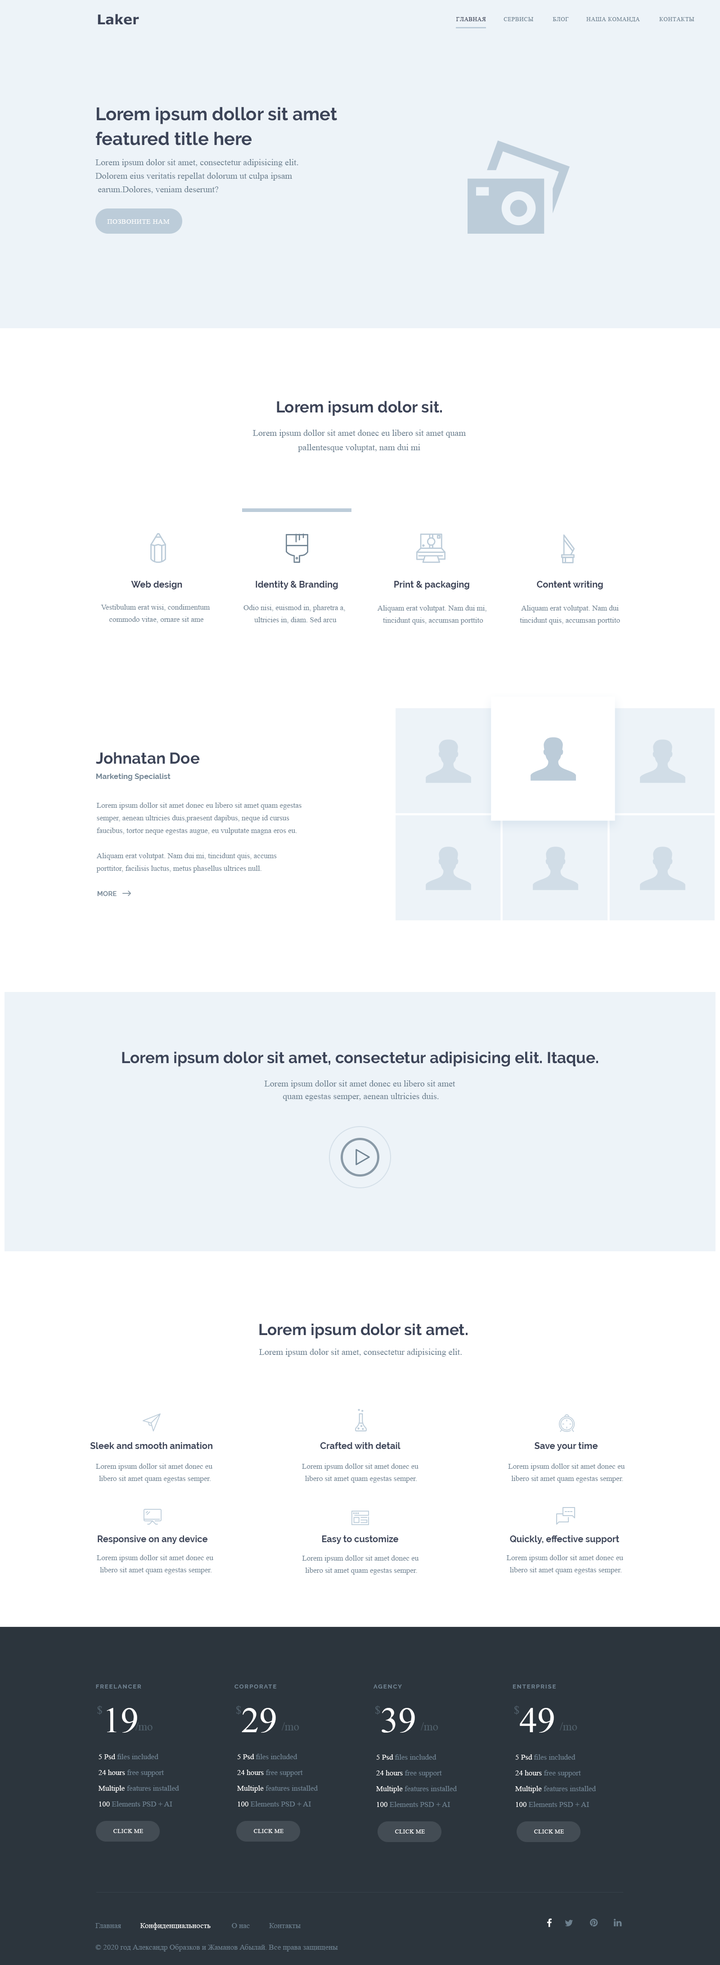
<style>
.page{position:relative;width:720px;height:1965px;background:#ffffff}
.page>*{position:absolute;margin:0}
.t1{font:13.5px "Verdana-Bold";color:#3c4357}
.t2{font:5.9px "TimesNewRomanPSMT";letter-spacing:0.05em;color:#718493;text-transform:uppercase}
.t3{font:5.9px "TimesNewRomanPSMT";letter-spacing:0.05em;color:#3c4357;text-transform:uppercase}
.t4{font:18px/24.8px "Raleway-Bold";color:#3c4458}
.t5{font:9px/13.5px "TimesNewRomanPSMT";color:#718493}
.t6{font:6.8px "TimesNewRomanPSMT";letter-spacing:0.05em;color:#ffffff;text-transform:uppercase}
.t7{font:15.8px "Raleway-Bold";color:#3c4357}
.t8{font:9px/14.4px "TimesNewRomanPSMT";color:#718493}
.t9{font:9px "Raleway-Bold";color:#3c4357}
.t10{font:7.7px/12.2px "TimesNewRomanPSMT";color:#718493}
.t11{font:48.3px "cozy";color:#bcccd9}
.t12{font:48.3px "cozy";color:#d1dde7}
.t13{font:15.8px "Raleway-Bold";color:#3c4458}
.t14{font:7.7px "Raleway-Bold";color:#718493}
.t15{font:7.7px/12.6px "TimesNewRomanPSMT";color:#718493}
.t16{font:6.8px "Raleway-Bold";color:#7d8e9c;text-transform:uppercase}
.t17{font:9px/12.6px "TimesNewRomanPSMT";color:#718493}
.t18{font:15.8px "cozy";color:#718493;font-weight:bold}
.t19{font:9px "TimesNewRomanPSMT";color:#718493}
.t20{font:9px "Raleway-Bold";color:#3c4458}
.t21{font:7.7px/12.1px "TimesNewRomanPSMT";color:#718493}
.t22{font:5.8px "Raleway-Bold";letter-spacing:0.15em;color:#718493;text-transform:uppercase}
.t23{font:5.9px "Raleway-Bold";letter-spacing:0.15em;color:#718493;text-transform:uppercase}
.t24{font:11.2px "TimesNewRomanPSMT";color:#505f6a}
.t25{font:36px "TimesNewRomanPSMT";color:#ffffff}
.t26{font:11.3px "TimesNewRomanPSMT";color:#505f6a}
.t27{font:7.7px/15.8px "TimesNewRomanPSMT";color:#718493}
.t28{font:7.7px/15.8px "TimesNewRomanPSMT";color:#ffffff}
.t29{font:5.9px "TimesNewRomanPSMT";letter-spacing:0.05em;color:#ffffff;text-transform:uppercase}
.t30{font:7.7px/21.6px "TimesNewRomanPSMT";color:#6d808e}
.t31{font:7.7px/21.6px "TimesNewRomanPSMT";color:#ffffff}
</style>
<div class="page">
<p class="t1" style="left:98px;top:14px;width:41px;height:11px">Laker</p>
<p class="t2" style="left:456px;top:17px;width:239px;height:5px"><span class="t3">Главная          </span>СЕРВИСЫ           БЛОГ          НАША КОМАНДА           КОНТАКТЫ</p>
<p class="t4" style="left:96px;top:107px;width:241px;height:38px">Lorem ipsum dollor sit amet <br>featured title here</p>
<p class="t5" style="left:95px;top:159px;width:204px;height:35px">Lorem ipsum dolor sit amet, consectetur adipisicing elit. <br>Dolorem eius veritatis repellat dolorum ut culpa ipsam<br> earum.Dolores, veniam deserunt?</p>
<p class="t6" style="left:107px;top:219px;width:63px;height:5px">ПОЗВОНИТЕ НАМ</p>
<p class="t7" style="left:277px;top:401px;width:165px;height:15px">Lorem ipsum dolor sit.</p>
<p class="t8" style="left:253px;top:430px;width:213px;height:22px;text-align:center">Lorem ipsum dollor sit amet donec eu libero sit amet quam<br>pallentesque voluptat, nam dui mi</p>
<p class="t9" style="left:131px;top:581px;width:51px;height:8px">Web design</p>
<p class="t9" style="left:256px;top:581px;width:82px;height:8px">Identity &amp; Branding</p>
<p class="t9" style="left:394px;top:581px;width:76px;height:8px">Print &amp; packaging</p>
<p class="t9" style="left:537px;top:581px;width:66px;height:8px">Content writing</p>
<p class="t10" style="left:101px;top:604px;width:109px;height:19px;text-align:center">Vestibulum erat wisi, condimentum <br>commodo vitae, ornare sit ame</p>
<p class="t10" style="left:244px;top:605px;width:101px;height:19px;text-align:center">Odio nisi, euismod in, pharetra a, <br>ultricies in, diam. Sed arcu</p>
<p class="t10" style="left:377px;top:605px;width:110px;height:19px;text-align:center">Aliquam erat volutpat. Nam dui mi, <br>tincidunt quis, accumsan porttito</p>
<p class="t10" style="left:520px;top:605px;width:100px;height:19px;text-align:center">Aliquam erat volutpat. Nam dui<br>tincidunt quis, accumsan porttito</p>
<p class="t11" style="left:531px;top:737px;width:45px;height:44px">I</p>
<p class="t12" style="left:426px;top:739px;width:45px;height:44px">I</p>
<p class="t12" style="left:640px;top:739px;width:46px;height:44px">I</p>
<p class="t13" style="left:96px;top:752px;width:104px;height:12px">Johnatan Doe</p>
<p class="t14" style="left:96px;top:773px;width:75px;height:8px">Marketing Specialist</p>
<p class="t15" style="left:96px;top:802px;width:206px;height:71px">Lorem ipsum dollor sit amet donec eu libero sit amet quam egestas <br>semper, aenean ultricies duis,praesent dapibus, neque id cursus <br>faucibus, tortor neque egestas augue, eu vulputate magna eros eu.<br><br>Aliquam erat volutpat. Nam dui mi, tincidunt quis, accums<br>porttitor, facilisis luctus, metus phasellus ultrices null.</p>
<p class="t12" style="left:426px;top:846px;width:45px;height:44px">I</p>
<p class="t12" style="left:533px;top:846px;width:46px;height:44px">I</p>
<p class="t12" style="left:640px;top:846px;width:46px;height:44px">I</p>
<p class="t16" style="left:97px;top:891px;width:20px;height:5px">More</p>
<p class="t13" style="left:122px;top:1051px;width:476px;height:16px">Lorem ipsum dolor sit amet, consectetur adipisicing elit. Itaque.</p>
<p class="t17" style="left:264px;top:1080px;width:192px;height:21px;text-align:center">Lorem ipsum dollor sit amet donec eu libero sit amet <br>quam egestas semper, aenean ultricies duis.</p>
<p class="t18" style="left:356px;top:1149px;width:14px;height:16px">y</p>
<p class="t13" style="left:259px;top:1323px;width:209px;height:16px">Lorem ipsum dolor sit amet.</p>
<p class="t19" style="left:259px;top:1348px;width:203px;height:9px">Lorem ipsum dolor sit amet, consectetur adipisicing elit.</p>
<p class="t20" style="left:90px;top:1442px;width:123px;height:7px">Sleek and smooth animation</p>
<p class="t20" style="left:320px;top:1442px;width:81px;height:7px">Crafted with detail</p>
<p class="t20" style="left:534px;top:1442px;width:64px;height:9px">Save your time</p>
<p class="t21" style="left:96px;top:1463px;width:117px;height:20px;text-align:center">Lorem ipsum dollor sit amet donec eu <br>libero sit amet quam egestas semper.</p>
<p class="t21" style="left:302px;top:1463px;width:117px;height:20px;text-align:center">Lorem ipsum dollor sit amet donec eu <br>libero sit amet quam egestas semper.</p>
<p class="t21" style="left:508px;top:1463px;width:117px;height:20px;text-align:center">Lorem ipsum dollor sit amet donec eu <br>libero sit amet quam egestas semper.</p>
<p class="t20" style="left:98px;top:1535px;width:110px;height:9px">Responsive on any device</p>
<p class="t20" style="left:322px;top:1535px;width:77px;height:9px">Easy to customize</p>
<p class="t20" style="left:510px;top:1535px;width:110px;height:9px">Quickly, effective support</p>
<p class="t21" style="left:97px;top:1555px;width:116px;height:19px;text-align:center">Lorem ipsum dollor sit amet donec eu <br>libero sit amet quam egestas semper.</p>
<p class="t21" style="left:302px;top:1555px;width:117px;height:19px;text-align:center">Lorem ipsum dollor sit amet donec eu <br>libero sit amet quam egestas semper.</p>
<p class="t21" style="left:507px;top:1555px;width:117px;height:19px;text-align:center">Lorem ipsum dollor sit amet donec eu <br>libero sit amet quam egestas semper.</p>
<p class="t22" style="left:96px;top:1684px;width:45px;height:4px">freelancer</p>
<p class="t23" style="left:235px;top:1684px;width:41px;height:4px">Corporate</p>
<p class="t23" style="left:374px;top:1684px;width:28px;height:4px">agency</p>
<p class="t23" style="left:513px;top:1684px;width:43px;height:4px">enterprise</p>
<p class="t24" style="left:97px;top:1705px;width:5px;height:9px">$</p>
<p class="t25" style="left:107px;top:1708px;width:30px;height:24px">19</p>
<p class="t26" style="left:236px;top:1705px;width:5px;height:9px">$</p>
<p class="t25" style="left:242px;top:1708px;width:34px;height:24px">29</p>
<p class="t26" style="left:375px;top:1705px;width:5px;height:9px">$</p>
<p class="t25" style="left:382px;top:1708px;width:33px;height:24px">39</p>
<p class="t26" style="left:515px;top:1705px;width:5px;height:9px">$</p>
<p class="t25" style="left:520px;top:1708px;width:34px;height:24px">49</p>
<p class="t24" style="left:136px;top:1722px;width:17px;height:8px">/mo</p>
<p class="t26" style="left:282px;top:1722px;width:17px;height:8px">/mo</p>
<p class="t26" style="left:421px;top:1722px;width:18px;height:8px">/mo</p>
<p class="t26" style="left:560px;top:1722px;width:18px;height:8px">/mo</p>
<p class="t27" style="left:98px;top:1754px;width:81px;height:52px"><span class="t28">5 Psd</span> files included<br><span class="t28">24 hours</span> free support<br><span class="t28">Multiple</span> features installed<br><span class="t28">100</span> Elements PSD + AI</p>
<p class="t27" style="left:237px;top:1754px;width:81px;height:52px"><span class="t28">5 Psd</span> files included<br><span class="t28">24 hours</span> free support<br><span class="t28">Multiple</span> features installed<br><span class="t28">100</span> Elements PSD + AI</p>
<p class="t27" style="left:376px;top:1754px;width:81px;height:53px"><span class="t28">5 Psd</span> files included<br><span class="t28">24 hours</span> free support<br><span class="t28">Multiple</span> features installed<br><span class="t28">100</span> Elements PSD + AI</p>
<p class="t27" style="left:516px;top:1754px;width:80px;height:53px"><span class="t28">5 Psd</span> files included<br><span class="t28">24 hours</span> free support<br><span class="t28">Multiple</span> features installed<br><span class="t28">100</span> Elements PSD + AI</p>
<p class="t29" style="left:113px;top:1829px;width:30px;height:4px">click me</p>
<p class="t29" style="left:254px;top:1829px;width:30px;height:4px">click me</p>
<p class="t29" style="left:395px;top:1829px;width:30px;height:4px">click me</p>
<p class="t29" style="left:534px;top:1829px;width:30px;height:4px">click me</p>
<p class="t30" style="left:95px;top:1922px;width:243px;height:29px">Главная        <span class="t31">  Конфиденциальность</span>           О нас          Контакты<br>© 2020 год Александр Образков и Жаманов Абылай. Все права защищены</p>
</div>
